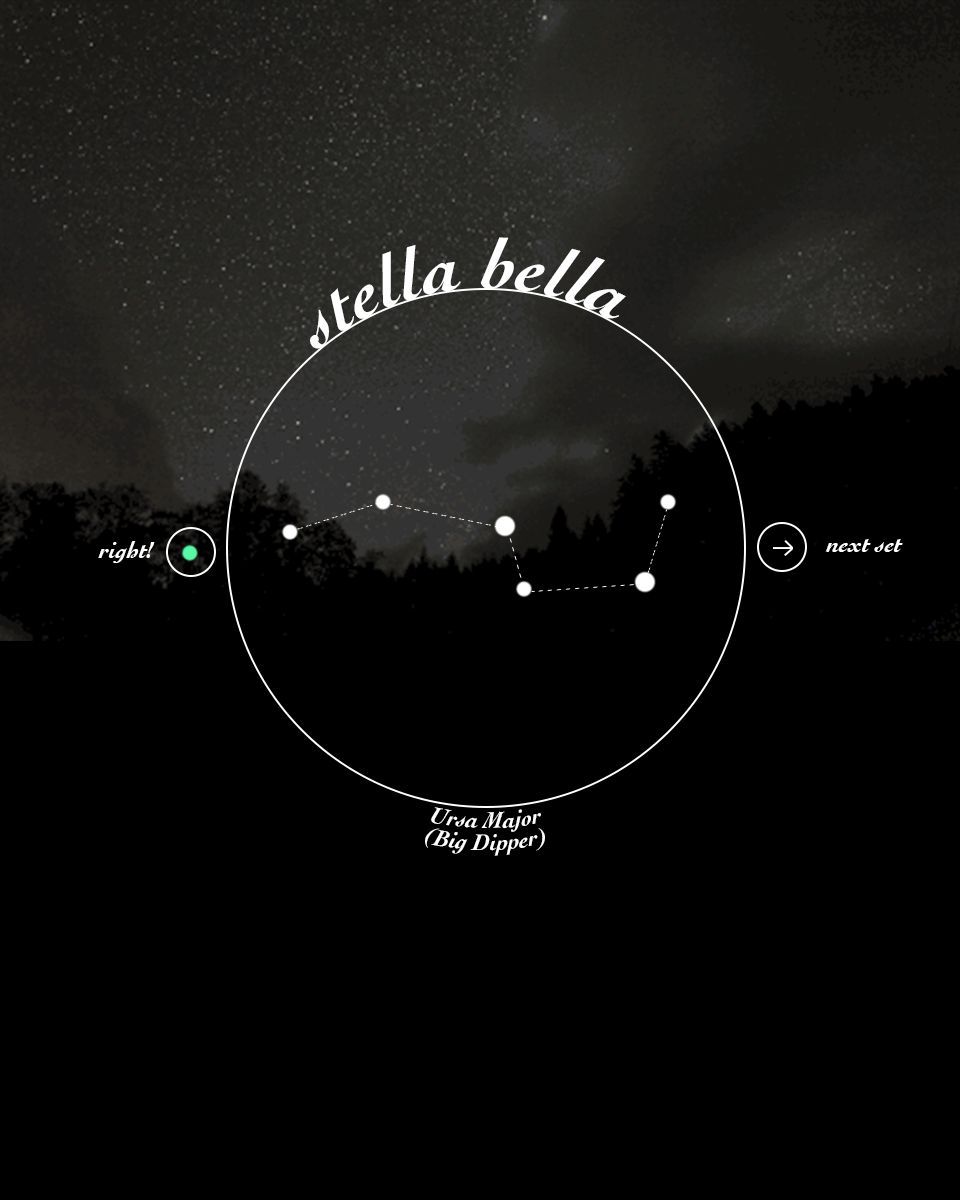
<style>
.page{position:relative;width:960px;height:1200px;background:#000000}
.page>*{position:absolute;margin:0}
.t1{font:72px "Cochin-BoldItalic";color:#ffffff}
.t2{font:24px "Cochin-BoldItalic";color:#ffffff}
</style>
<div class="page">
<p class="t1" style="left:310px;top:237px;width:316px;height:112px">stella bella</p>
<p class="t2" style="left:98px;top:541px;width:57px;height:22px">right!</p>
<p class="t2" style="left:825px;top:539px;width:78px;height:13px">next set</p>
<p class="t2" style="left:431px;top:807px;width:110px;height:25px">Ursa Major</p>
<p class="t2" style="left:425px;top:828px;width:120px;height:28px">(Big Dipper)</p>
</div>
